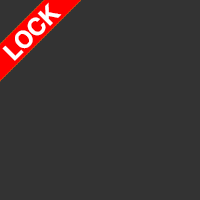
<style>
.page{position:relative;width:200px;height:200px;background:#333333}
.page>*{position:absolute;margin:0}
.t1{font:24.2px "HelveticaNeue-Bold";letter-spacing:-0.02em;color:#ffffff}
.t2{font:24.2px "HelveticaNeue-Bold";letter-spacing:-0.02em}
</style>
<div class="page">
<p class="t1" style="left:2px;top:2px;width:60px;height:59px;rotate:-45deg">LOCK</p>
<p class="t2" style="left:6px;top:6px;width:48px;height:51px;rotate:-45deg">NEW</p>
</div>
